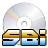
<style>
.page{position:relative;width:48px;height:48px}
.page>*{position:absolute;margin:0}
.t1{font:24px "Uranium"}
</style>
<div class="page">
<p class="t1" style="left:3px;top:30px;width:43px;height:15px">SBi</p>
</div>
